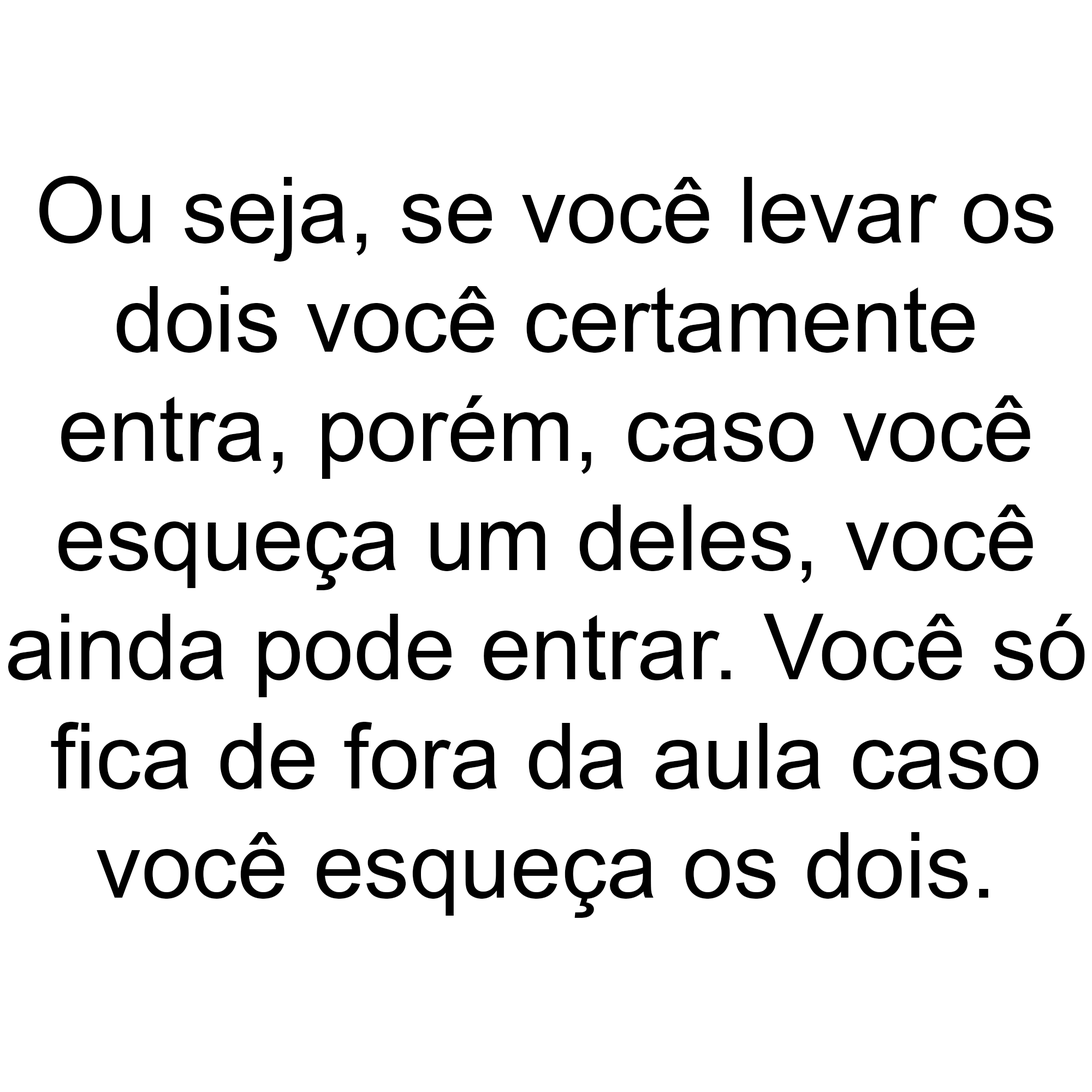
<style>
.page{position:relative;width:1092px;height:1092px;background:#ffffff}
.page>*{position:absolute;margin:0}
.t1{font:91px "ArialMT";color:#000000}
</style>
<div class="page">
<p class="t1" style="left:8px;top:176px;width:1077px;height:742px;text-align:center">Ou seja, se você levar os<br>dois você certamente<br>entra, porém, caso você<br>esqueça um deles, você<br>ainda pode entrar. Você só<br>fica de fora da aula caso<br>você esqueça os dois.</p>
</div>
